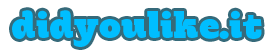
<style>
.page{position:relative;width:270px;height:50px;background:#ffffff}
.page>*{position:absolute;margin:0}
.t1{font:36px "Hernandez-Bold";color:#00beff}
</style>
<div class="page">
<p class="t1" style="left:12px;top:10px;width:250px;height:37px">didyoulike.it</p>
</div>
